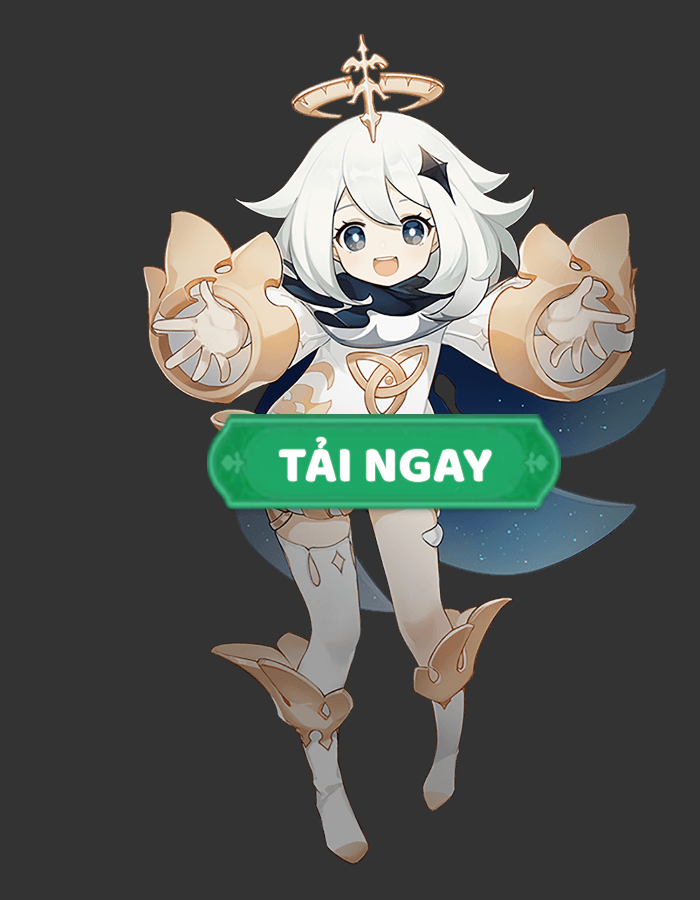
<style>
.page{position:relative;width:700px;height:900px;background:#333333}
.page>*{position:absolute;margin:0}
.t1{font:51.6px "Baloo";color:#ffffff}
</style>
<div class="page">
<p class="t1" style="left:279px;top:437px;width:213px;height:45px">TẢI NGAY</p>
</div>
